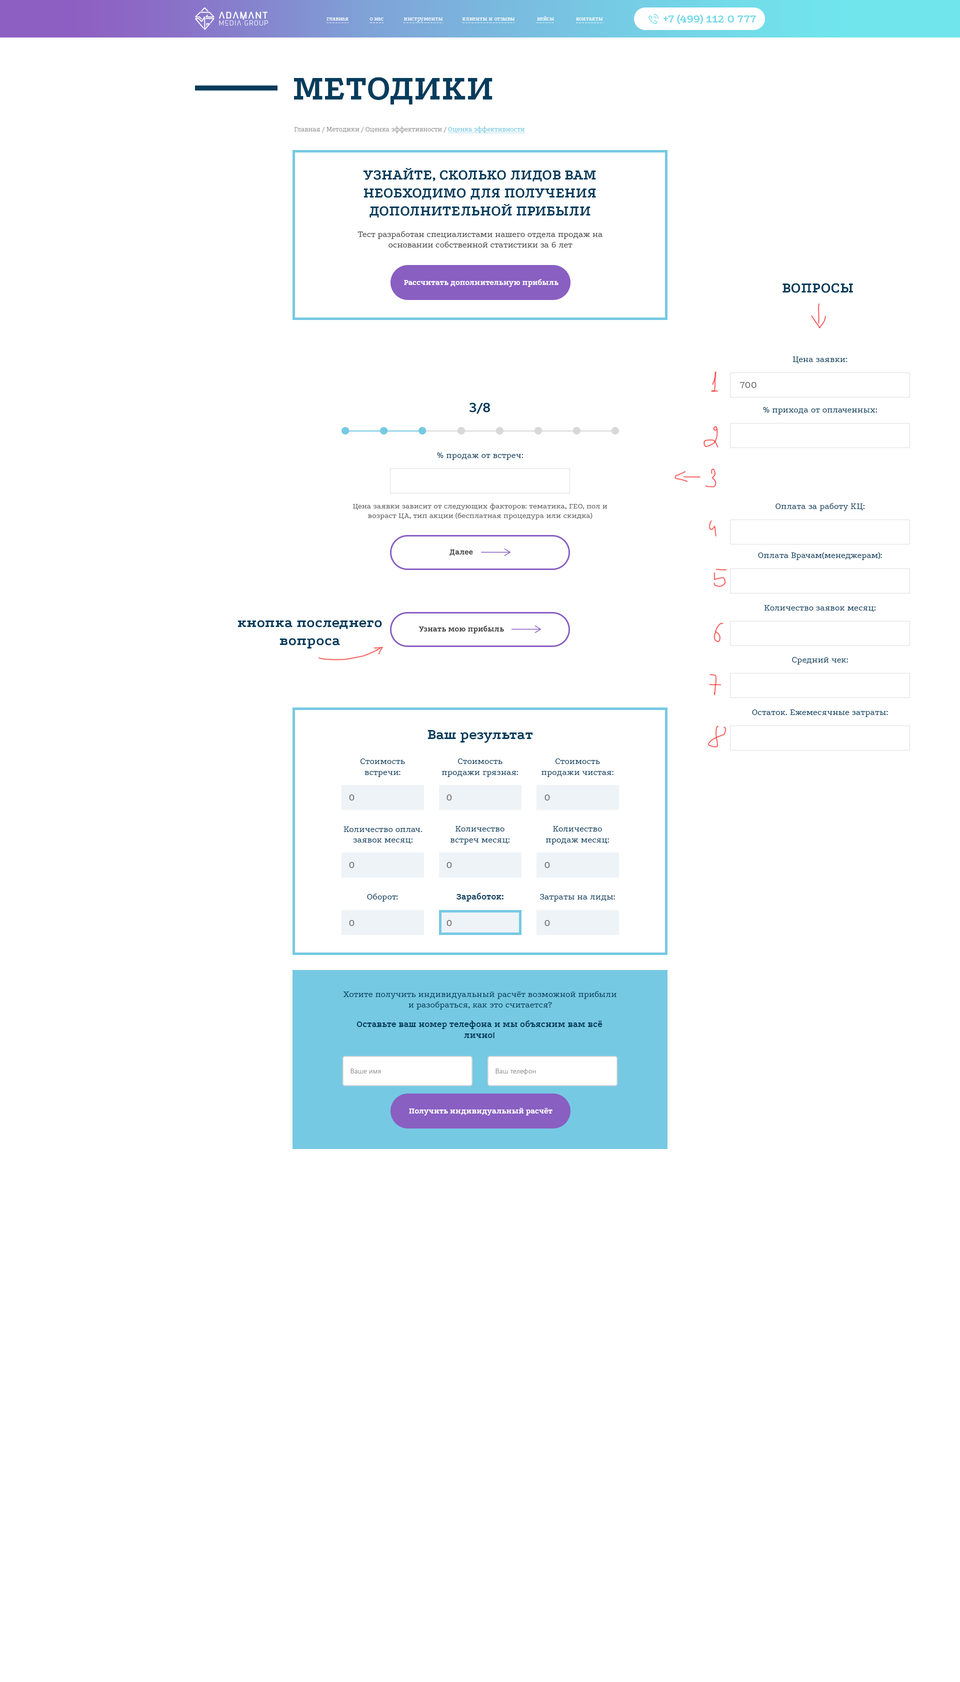
<style>
.page{position:relative;width:960px;height:1682px;background:#ffffff}
.page>*{position:absolute;margin:0}
.t1{font:6px "Podkova-Regular";color:#ffffff}
.t2{font:12px "Podkova-Bold";color:#73d8e8}
.t3{font:36px "Podkova-Bold";color:#053c5c;text-transform:uppercase}
.t4{font:7px "Podkova-Regular";color:#999999}
.t5{font:7px "Podkova-Regular";color:#76c9e3;text-decoration:underline}
.t6{font:15px "Podkova-Bold";color:#053c5c;text-transform:uppercase}
.t7{font:9px "Podkova-Regular";color:#444444}
.t8{font:8px "Podkova-ExtraBold";color:#ffffff}
.t9{font:15px "Podkova-Bold";letter-spacing:0.01em;color:#053c5c}
.t10{font:9px "Podkova-Regular";letter-spacing:0.01em;color:#053c5c}
.t11{font:10px "Podkova-Regular";letter-spacing:0.01em;color:#666666}
.t12{font:15px "Podkova-Bold";color:#053c5c}
.t13{font:8px "Podkova-Regular";letter-spacing:0.01em;color:#666666}
.t14{font:8px "Podkova-ExtraBold";color:#444444}
.t15{font:9px "Podkova-Bold";letter-spacing:0.01em;color:#053c5c}
.t16{font:7px "SegoeUI";color:#999999}
</style>
<div class="page">
<p class="t1" style="left:326px;top:18px;width:22px;height:2px">главная</p>
<p class="t1" style="left:370px;top:18px;width:14px;height:2px">о нас</p>
<p class="t1" style="left:404px;top:18px;width:39px;height:4px">инструменты</p>
<p class="t1" style="left:462px;top:18px;width:53px;height:2px">клиенты и отзывы</p>
<p class="t1" style="left:537px;top:16px;width:17px;height:4px">кейсы</p>
<p class="t1" style="left:576px;top:18px;width:27px;height:2px">контакты</p>
<p class="t2" style="left:663px;top:14px;width:93px;height:10px">+7 (499) 112 0 777</p>
<p class="t3" style="left:294px;top:77px;width:198px;height:27px">методики</p>
<p class="t4" style="left:294px;top:126px;width:231px;height:8px">Главная / Методики / Оценка эффективности / <span class="t5">Оценка эффективности</span></p>
<p class="t6" style="left:363px;top:168px;width:233px;height:50px;text-align:center">Узнайте, сколько лидов вам<br>необходимо для получения<br>дополнительной прибыли</p>
<p class="t7" style="left:358px;top:231px;width:245px;height:17px;text-align:center">Тест разработан специалистами нашего отдела продаж на основании собственной статистики за 6 лет</p>
<p class="t8" style="left:404px;top:279px;width:154px;height:8px">Рассчитать дополнительную прибыль</p>
<p class="t9" style="left:782px;top:283px;width:71px;height:10px">ВОПРОСЫ</p>
<p class="t10" style="left:792px;top:356px;width:56px;height:8px">Цена заявки:</p>
<p class="t11" style="left:740px;top:382px;width:16px;height:6px">700</p>
<p class="t12" style="left:469px;top:402px;width:21px;height:12px">3/8</p>
<p class="t10" style="left:763px;top:407px;width:114px;height:7px">% прихода от оплаченных:</p>
<p class="t10" style="left:437px;top:452px;width:86px;height:8px">% продаж от встреч:</p>
<p class="t13" style="left:352px;top:503px;width:256px;height:17px;text-align:center">Цена заявки зависит от следующих факторов: тематика, ГЕО, пол и возраст ЦА, тип акции (бесплатная процедура или скидка)</p>
<p class="t10" style="left:776px;top:503px;width:88px;height:8px">Оплата за работу КЦ:</p>
<p class="t14" style="left:450px;top:550px;width:23px;height:6px">Далее</p>
<p class="t10" style="left:758px;top:552px;width:124px;height:8px">Оплата Врачам(менеджерам):</p>
<p class="t10" style="left:764px;top:605px;width:112px;height:7px">Количество заявок месяц:</p>
<p class="t9" style="left:238px;top:620px;width:144px;height:28px;text-align:center">кнопка последнего<br>вопроса</p>
<p class="t14" style="left:418px;top:626px;width:86px;height:8px">Узнать мою прибыль</p>
<p class="t10" style="left:792px;top:657px;width:56px;height:7px">Средний чек:</p>
<p class="t10" style="left:752px;top:710px;width:136px;height:7px">Остаток. Ежемесячные затраты:</p>
<p class="t12" style="left:428px;top:730px;width:105px;height:13px">Ваш результат</p>
<p class="t10" style="left:360px;top:758px;width:45px;height:19px;text-align:center">Стоимость<br>встречи:</p>
<p class="t10" style="left:442px;top:758px;width:76px;height:19px;text-align:center">Стоимость<br>продажи грязная:</p>
<p class="t10" style="left:542px;top:758px;width:72px;height:19px;text-align:center">Стоимость<br>продажи чистая:</p>
<p class="t11" style="left:349px;top:794px;width:5px;height:6px">0</p>
<p class="t11" style="left:446px;top:794px;width:6px;height:6px">0</p>
<p class="t11" style="left:544px;top:794px;width:6px;height:6px">0</p>
<p class="t10" style="left:344px;top:826px;width:78px;height:18px;text-align:center">Количество оплач.<br>заявок месяц:</p>
<p class="t10" style="left:450px;top:826px;width:60px;height:18px;text-align:center">Количество<br>встреч месяц:</p>
<p class="t10" style="left:546px;top:826px;width:63px;height:18px;text-align:center">Количество<br>продаж месяц:</p>
<p class="t11" style="left:349px;top:862px;width:5px;height:6px">0</p>
<p class="t11" style="left:446px;top:862px;width:6px;height:6px">0</p>
<p class="t11" style="left:544px;top:862px;width:6px;height:6px">0</p>
<p class="t10" style="left:367px;top:894px;width:31px;height:8px">Оборот:</p>
<p class="t15" style="left:456px;top:892px;width:48px;height:10px">Заработок:</p>
<p class="t10" style="left:540px;top:894px;width:75px;height:8px">Затраты на лиды:</p>
<p class="t11" style="left:349px;top:920px;width:5px;height:6px">0</p>
<p class="t11" style="left:446px;top:920px;width:6px;height:6px">0</p>
<p class="t11" style="left:544px;top:920px;width:6px;height:6px">0</p>
<p class="t10" style="left:343px;top:991px;width:273px;height:19px;text-align:center">Хотите получить индивидуальный расчёт возможной прибыли и разобраться, как это считается?</p>
<p class="t15" style="left:356px;top:1020px;width:246px;height:18px;text-align:center">Оставьте ваш номер телефона и мы объясним вам всё лично!</p>
<p class="t16" style="left:350px;top:1068px;width:31px;height:6px">Ваше имя</p>
<p class="t16" style="left:496px;top:1068px;width:40px;height:7px">Ваш телефон</p>
<p class="t8" style="left:409px;top:1108px;width:143px;height:8px">Получить индивидуальный расчёт</p>
</div>
